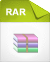
<style>
.page{position:relative;width:50px;height:62px}
.page>*{position:absolute;margin:0}
.t1{font:9px "Arial-BoldMT";color:#ffffff;font-weight:bold}
</style>
<div class="page">
<p class="t1" style="left:6px;top:8px;width:20px;height:8px">RAR</p>
</div>
